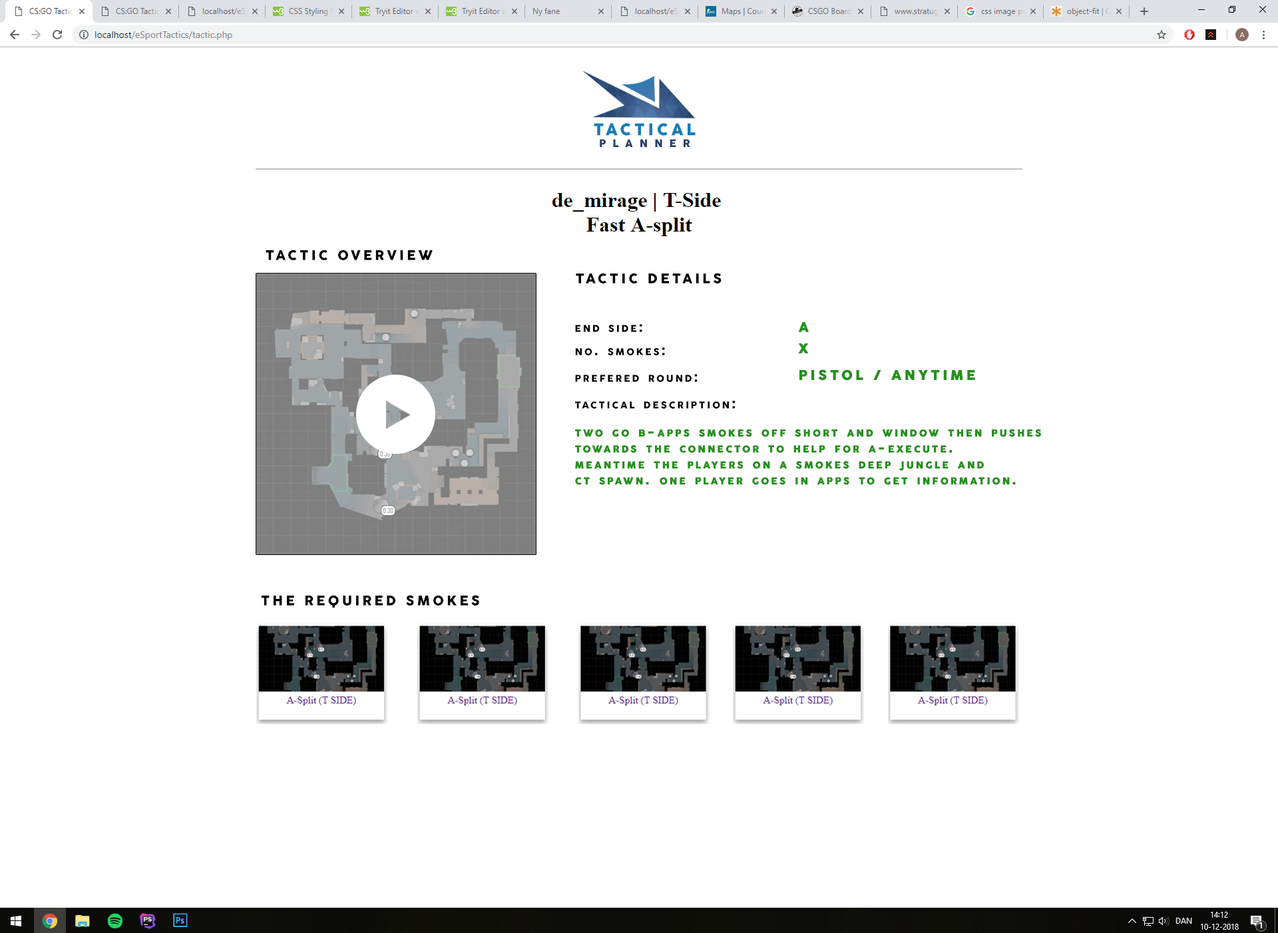
<style>
.page{position:relative;width:1278px;height:933px;background:#ffffff}
.page>*{position:absolute;margin:0}
.t1{font:13.3px "Cocogoose";letter-spacing:0.2em;color:#000000}
.t2{font:13.3px "Cocogoose";letter-spacing:0.2em;color:#000000;font-variant:small-caps}
.t3{font:13.3px "Cocogoose";letter-spacing:0.2em;color:#25911d;font-variant:small-caps;font-weight:bold}
</style>
<div class="page">
<p class="t1" style="left:266px;top:250px;width:167px;height:10px">TACTIC OVERVIEW</p>
<p class="t1" style="left:576px;top:273px;width:145px;height:11px">TACTIC DETAILS</p>
<p class="t2" style="left:575px;top:324px;width:67px;height:8px">end side:</p>
<p class="t3" style="left:799px;top:322px;width:10px;height:10px">A</p>
<p class="t2" style="left:575px;top:347px;width:90px;height:8px">no. smokes:</p>
<p class="t3" style="left:798px;top:343px;width:11px;height:10px">X</p>
<p class="t2" style="left:575px;top:374px;width:123px;height:8px">prefered round:</p>
<p class="t3" style="left:799px;top:369px;width:176px;height:12px">PISTOL / ANYTIME</p>
<p class="t2" style="left:575px;top:401px;width:160px;height:8px">tactical description:</p>
<p class="t3" style="left:575px;top:429px;width:466px;height:56px">two go b-apps smokes off short and window then pushes <br>towards the connector to help for a-execute.<br>meantime the players on a smokes deep jungle and <br>ct spawn. one player goes in apps to get information.</p>
<p class="t1" style="left:261px;top:595px;width:218px;height:13px">THE REQUIRED SMOKES</p>
</div>
